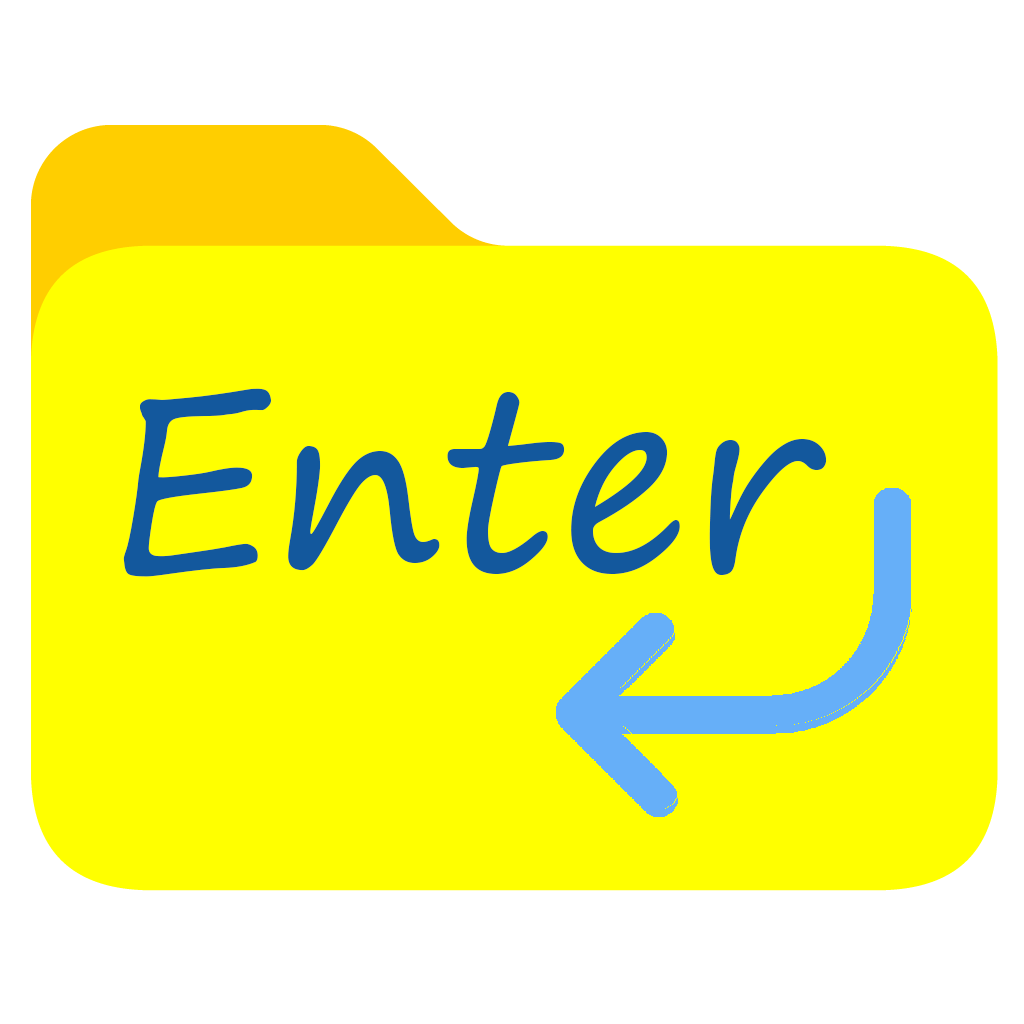
<style>
.page{position:relative;width:1024px;height:1024px;background:#ffff00}
.page>*{position:absolute;margin:0}
.t1{font:250px "SegoePrint";color:#13589d}
</style>
<div class="page">
<p class="t1" style="left:123px;top:388px;width:704px;height:189px">Enter</p>
</div>
